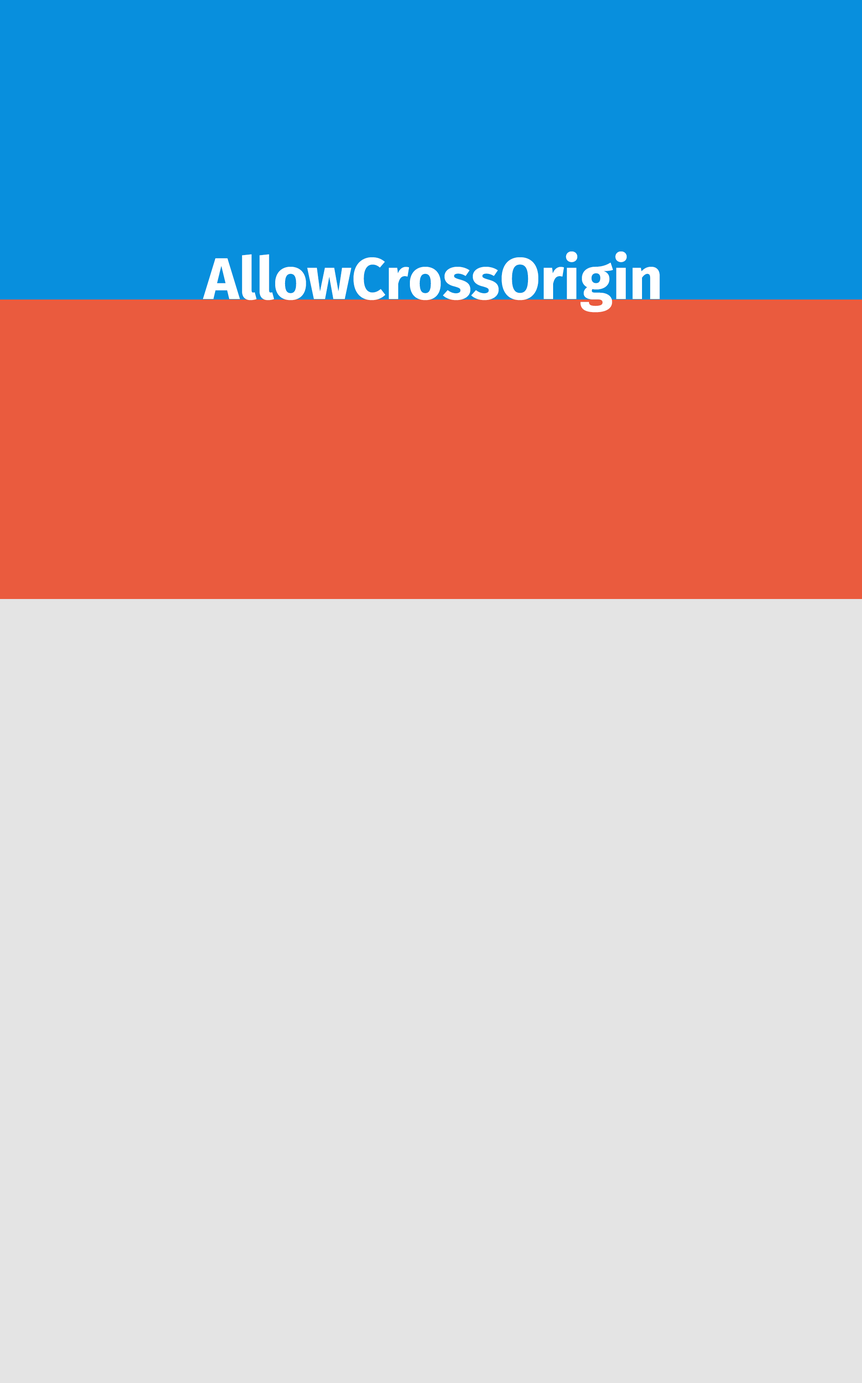
<style>
.page{position:relative;width:862px;height:1383px;background:#e4e4e4}
.page>*{position:absolute;margin:0}
.t1{font:58.8px "FiraSansOT-Bold";color:#ffffff}
</style>
<div class="page">
<p class="t1" style="left:203px;top:251px;width:457px;height:62px">AllowCrossOrigin</p>
</div>
